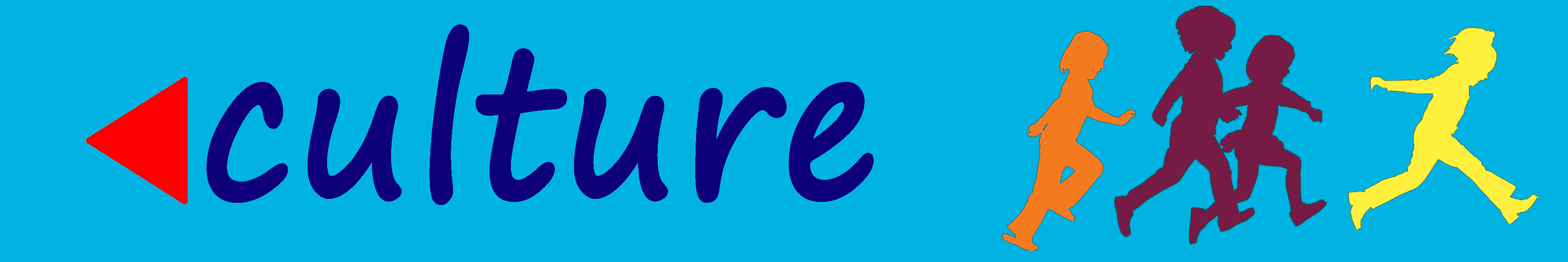
<style>
.page{position:relative;width:1568px;height:262px;background:#00b3e3}
.page>*{position:absolute;margin:0}
.t1{font:202.7px "SegoePrint";color:#0e007b;font-weight:bold;scale:0.91 1}
.t2{font:149px "Wingdings3";color:#ff0000;font-weight:bold;scale:0.91 1}
</style>
<div class="page">
<p class="t1" style="left:86px;top:24px;width:788px;height:181px"><span class="t2">t</span>culture</p>
</div>
